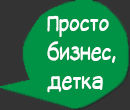
<style>
.page{position:relative;width:130px;height:110px;background:#009245}
.page>*{position:absolute;margin:0}
.t1{font:24px "SuplexmentaryComicNC";color:#ffffff;scale:0.8 1}
</style>
<div class="page">
<p class="t1" style="left:47px;top:15px;width:69px;height:78px">Просто <br>бизнес, <br>детка</p>
</div>
